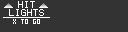
<style>
.page{position:relative;width:128px;height:32px;background:#333333}
.page>*{position:absolute;margin:0}
.t1{font:8px/8px "Terminal";color:#fefefe}
</style>
<div class="page">
<p class="t1" style="left:9px;top:1px;width:35px;height:15px;text-align:center">HIT<br>LIGHTS</p>
</div>
